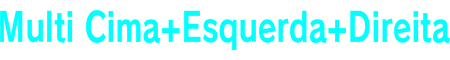
<style>
.page{position:relative;width:450px;height:60px;background:#ffffff}
.page>*{position:absolute;margin:0}
.t1{font:40px "RodinPro-B";color:#00ffff;scale:0.75 1}
</style>
<div class="page">
<p class="t1" style="left:0px;top:10px;width:450px;height:40px">Multi Cima+Esquerda+Direita</p>
</div>
